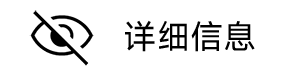
<style>
.page{position:relative;width:295px;height:74px;background:#ffffff}
.page>*{position:absolute;margin:0}
.t1{font:32.9px "MiSans-Regular";color:#000000}
</style>
<div class="page">
<p class="t1" style="left:125px;top:20px;width:130px;height:32px">详细信息</p>
</div>
